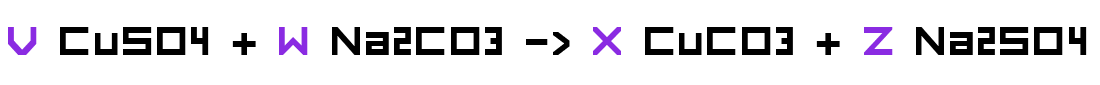
<style>
.page{position:relative;width:1100px;height:85px;background:#ffffff}
.page>*{position:absolute;margin:0}
.t1{font:54px "FORCED-SQUARE";color:#000000}
.t2{font:54px "FORCED-SQUARE";color:#8a2be2}
</style>
<div class="page">
<p class="t1" style="left:8px;top:27px;width:1079px;height:28px"><span class="t2">V</span> CuSO4 + <span class="t2">W </span>Na2CO3 -&gt; <span class="t2">X</span> CuCO3 + <span class="t2">Z </span>Na2SO4</p>
</div>
